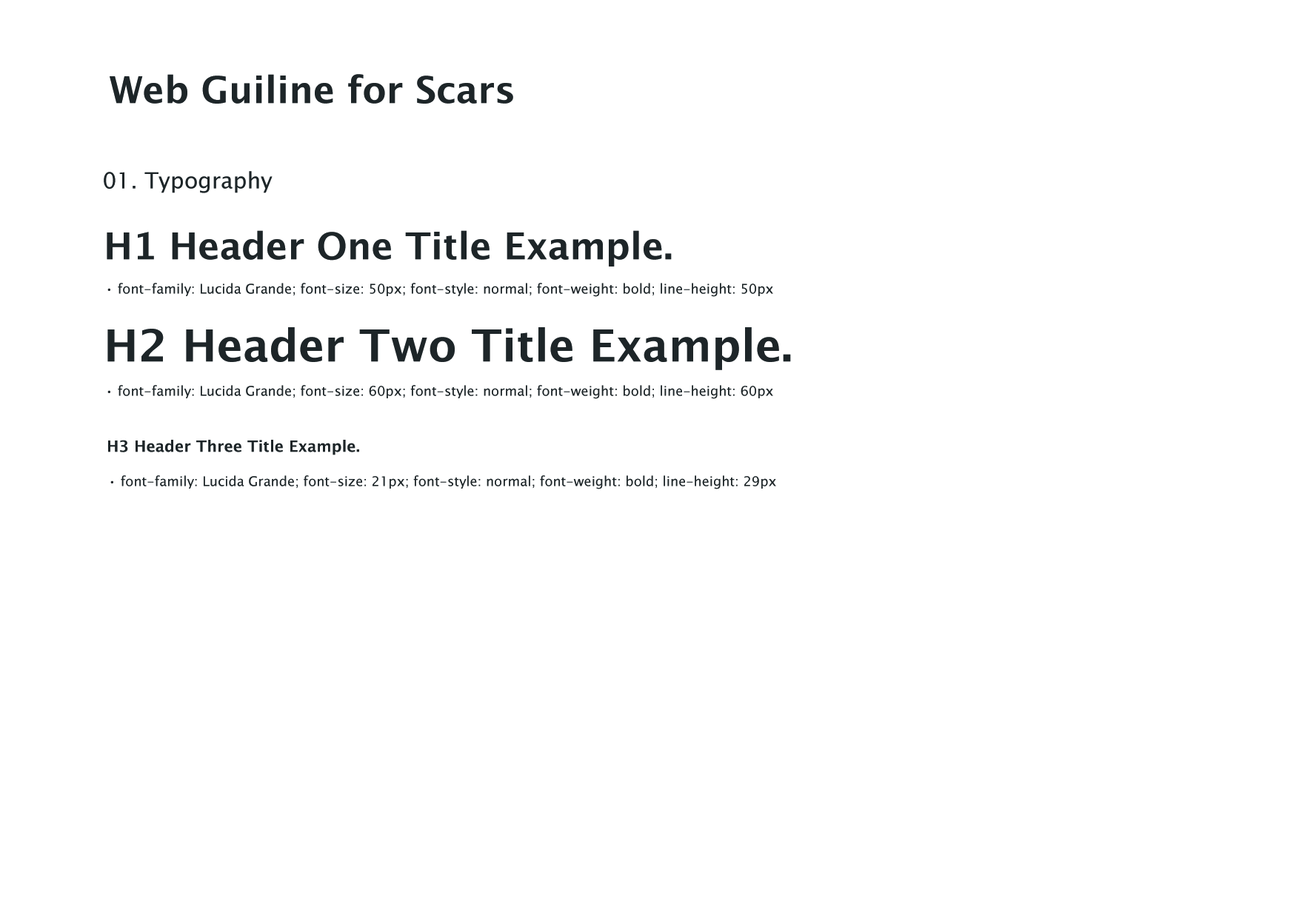
<style>
.page{position:relative;width:1299px;height:918px;background:#ffffff}
.page>*{position:absolute;margin:0}
.t1{font:37px "LucidaGrande-Bold";color:#1d2528}
.t2{font:22.2px "LucidaSansUnicode";color:#1d2528}
.t3{font:13.3px "LucidaSansUnicode";color:#1d2528}
.t4{font:44.4px "LucidaGrande-Bold";color:#1d2528}
.t5{font:15.5px "LucidaGrande-Bold";color:#1d2528}
</style>
<div class="page">
<p class="t1" style="left:110px;top:74px;width:403px;height:30px">Web Guiline for Scars</p>
<p class="t2" style="left:104px;top:171px;width:168px;height:22px">01. Typography</p>
<p class="t1" style="left:107px;top:230px;width:565px;height:37px">H1 Header One Title Example.</p>
<p class="t3" style="left:107px;top:283px;width:666px;height:14px">• font-family: Lucida Grande; font-size: 50px; font-style: normal; font-weight: bold; line-height: 50px</p>
<p class="t4" style="left:107px;top:327px;width:684px;height:43px">H2 Header Two Title Example.</p>
<p class="t3" style="left:107px;top:385px;width:666px;height:14px">• font-family: Lucida Grande; font-size: 60px; font-style: normal; font-weight: bold; line-height: 60px</p>
<p class="t5" style="left:108px;top:440px;width:251px;height:15px">H3 Header Three Title Example.</p>
<p class="t3" style="left:110px;top:475px;width:666px;height:14px">• font-family: Lucida Grande; font-size: 21px; font-style: normal; font-weight: bold; line-height: 29px</p>
</div>
